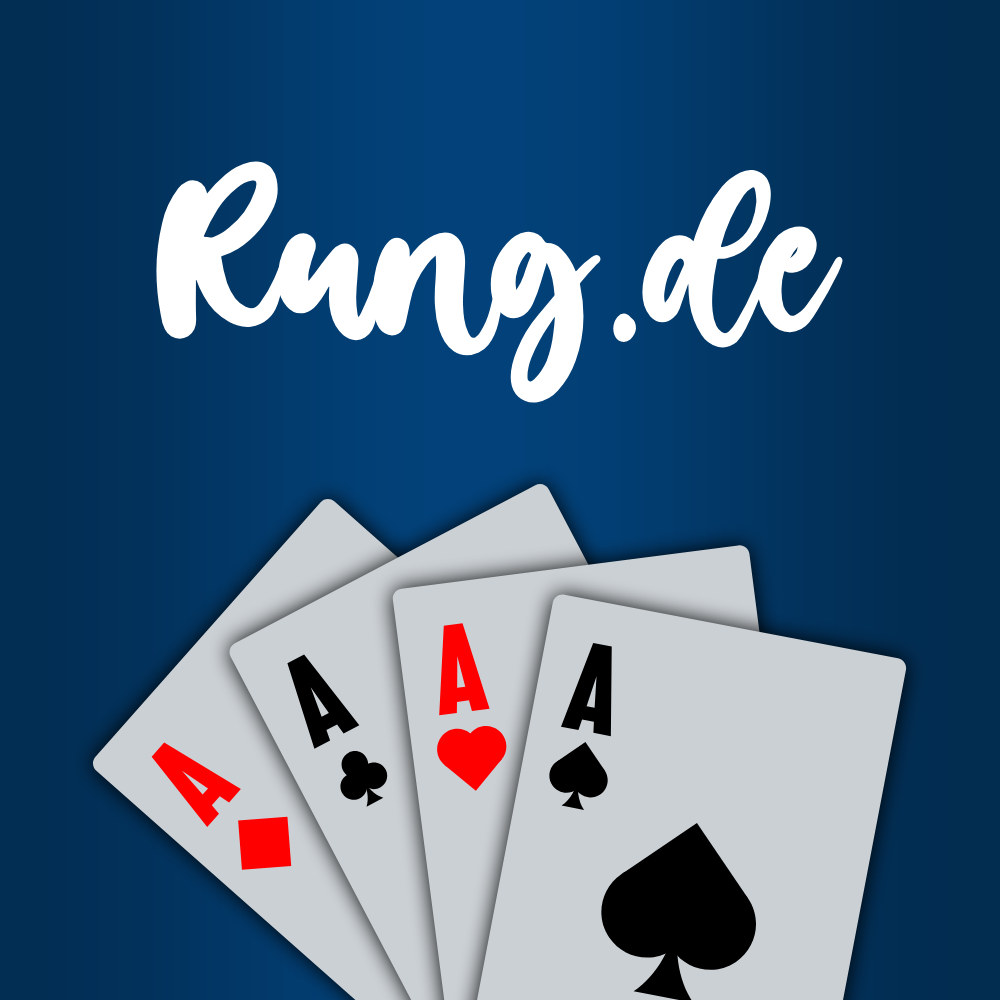
<style>
.page{position:relative;width:1000px;height:1000px;background:#cbd0d4}
.page>*{position:absolute;margin:0}
.t1{font:221.8px "CandyCrush";color:#ffffff}
.t2{font:121.7px "AmericanCaptain";color:#ff0000}
.t3{font:121.7px "AmericanCaptain";color:#000000}
</style>
<div class="page">
<p class="t1" style="left:156px;top:161px;width:687px;height:242px">Rung.de</p>
<p class="t2" style="left:439px;top:623px;width:51px;height:93px;rotate:-7deg">A</p>
<p class="t3" style="left:287px;top:654px;width:73px;height:95px;rotate:-28deg">A</p>
<p class="t3" style="left:561px;top:643px;width:51px;height:94px;rotate:11deg">A</p>
<p class="t2" style="left:151px;top:742px;width:90px;height:85px;rotate:-49deg">A</p>
</div>
